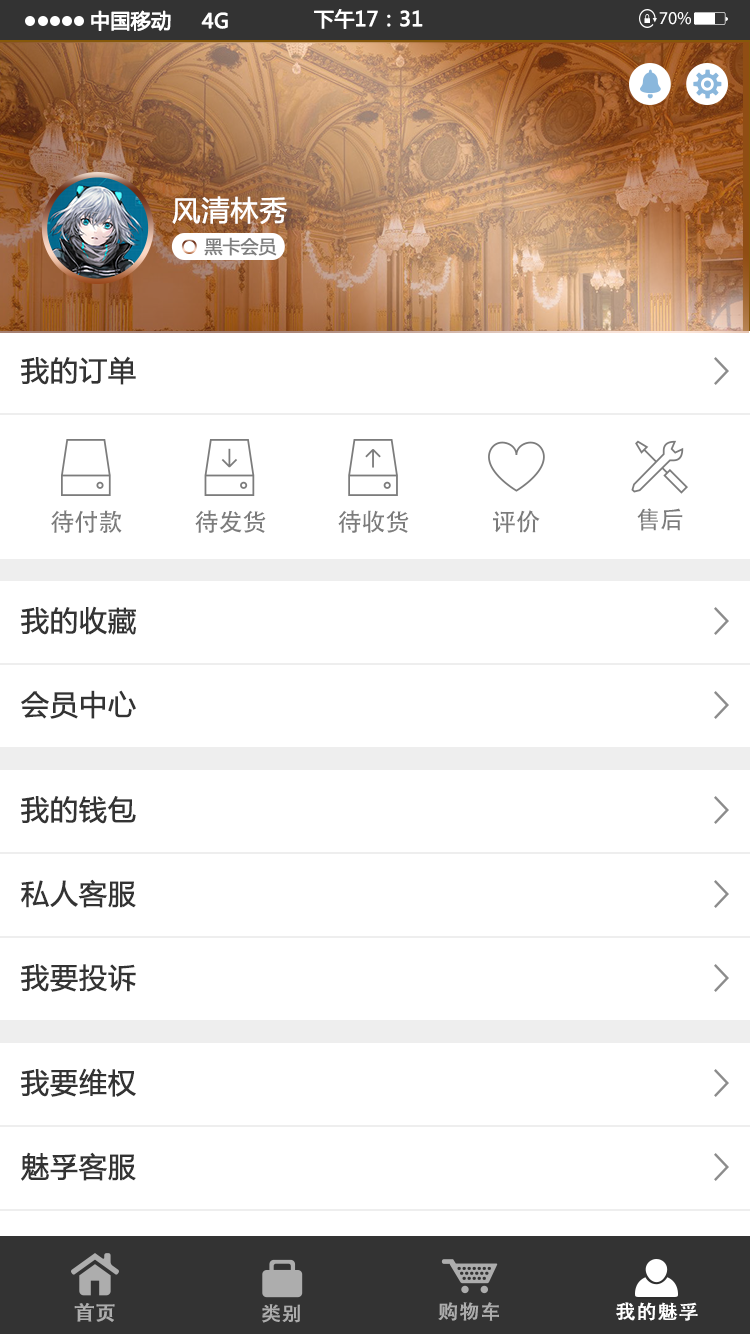
<style>
.page{position:relative;width:750px;height:1334px;background:#ffffff}
.page>*{position:absolute;margin:0}
.t1{font:20px "MicrosoftYaHei";color:#ffffff;font-weight:bold}
.t2{font:19.8px "MicrosoftYaHei";color:#ffffff;font-weight:bold}
.t3{font:18px "MyriadPro-Regular";color:#ffffff}
.t4{font:28px "MicrosoftYaHei";color:#ffffff;font-weight:bold}
.t5{font:18px "MicrosoftYaHei";color:#7e7e7e;font-weight:bold}
.t6{font:28px "MicrosoftYaHei";color:#333333;font-weight:bold}
.t7{font:24.4px "AdobeHeitiStd-Regular";color:#7c7c7c}
.t8{font:24px "AdobeHeitiStd-Regular";color:#7c7c7c}
.t9{font:19.5px "AdobeHeitiStd-Regular";color:#adadad;font-weight:bold}
.t10{font:19.5px "AdobeHeitiStd-Regular";color:#ffffff;font-weight:bold}
.t11{font:20px "AdobeHeitiStd-Regular";color:#adadad;font-weight:bold;scale:1.04 1}
</style>
<div class="page">
<p class="t1" style="left:91px;top:10px;width:80px;height:21px">中国移动</p>
<p class="t2" style="left:201px;top:12px;width:27px;height:17px">4G</p>
<p class="t2" style="left:314px;top:9px;width:109px;height:20px">下午17：31</p>
<p class="t3" style="left:659px;top:12px;width:32px;height:13px">70 %</p>
<p class="t4" style="left:172px;top:196px;width:116px;height:28px">风清林秀</p>
<p class="t5" style="left:204px;top:237px;width:73px;height:19px">黑卡会员</p>
<p class="t6" style="left:21px;top:356px;width:115px;height:29px">我的订单</p>
<p class="t7" style="left:51px;top:510px;width:71px;height:23px">待付款</p>
<p class="t7" style="left:195px;top:510px;width:71px;height:23px">待发货</p>
<p class="t7" style="left:338px;top:510px;width:71px;height:23px">待收货</p>
<p class="t8" style="left:493px;top:510px;width:47px;height:23px">评价</p>
<p class="t8" style="left:637px;top:508px;width:46px;height:23px">售后</p>
<p class="t6" style="left:21px;top:606px;width:115px;height:29px">我的收藏</p>
<p class="t6" style="left:21px;top:690px;width:115px;height:29px">会员中心</p>
<p class="t6" style="left:21px;top:796px;width:115px;height:28px">我的钱包</p>
<p class="t6" style="left:21px;top:879px;width:115px;height:29px">私人客服</p>
<p class="t6" style="left:21px;top:964px;width:115px;height:28px">我要投诉</p>
<p class="t6" style="left:21px;top:1068px;width:115px;height:29px">我要维权</p>
<p class="t6" style="left:21px;top:1152px;width:115px;height:29px">魅孚客服</p>
<p class="t9" style="left:438px;top:1302px;width:61px;height:19px">购物车</p>
<p class="t10" style="left:616px;top:1302px;width:82px;height:19px">我的魅孚</p>
<p class="t11" style="left:74px;top:1303px;width:41px;height:19px">首页</p>
<p class="t9" style="left:262px;top:1304px;width:38px;height:19px">类别</p>
</div>
